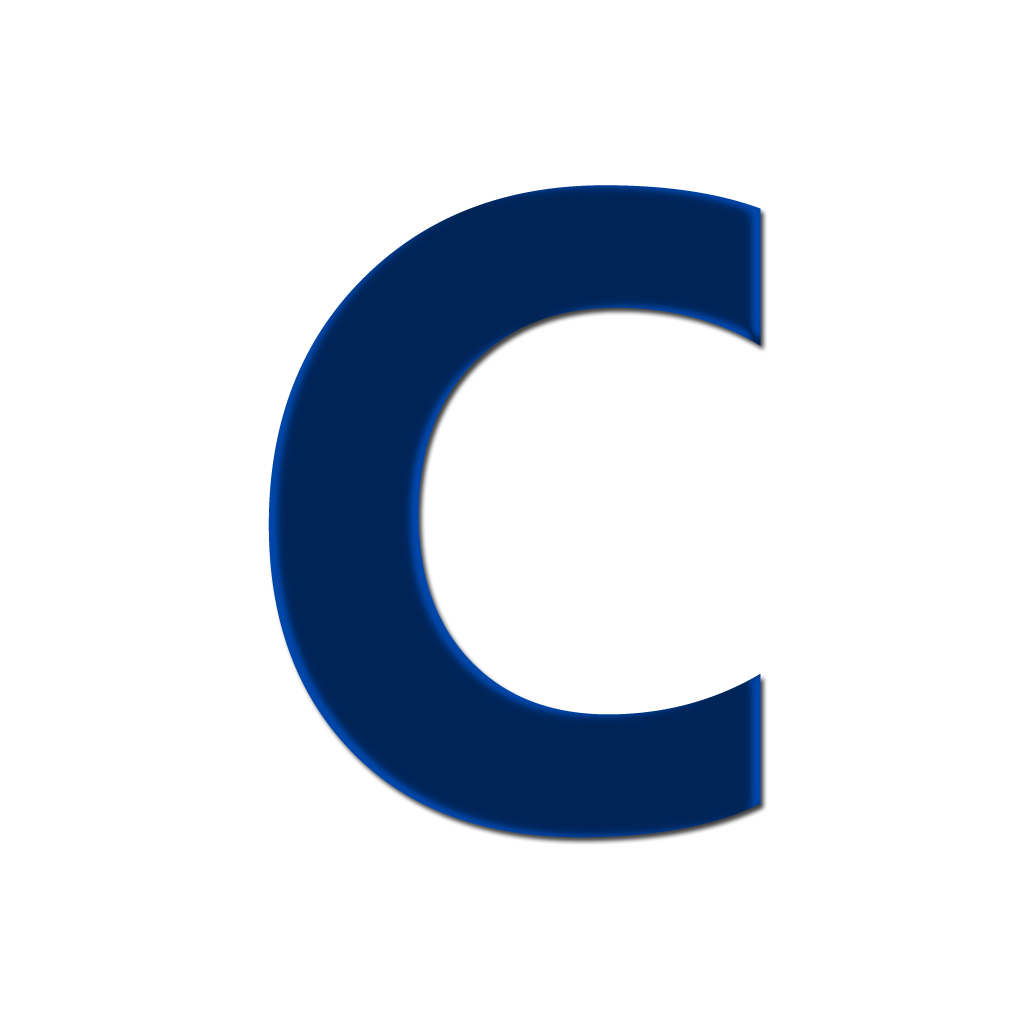
<style>
.page{position:relative;width:1024px;height:1024px;background:#ffffff}
.page>*{position:absolute;margin:0}
.t1{font:900px "MicrosoftPhagsPa-Bold";color:#002355}
</style>
<div class="page">
<p class="t1" style="left:268px;top:185px;width:493px;height:653px">C</p>
</div>
